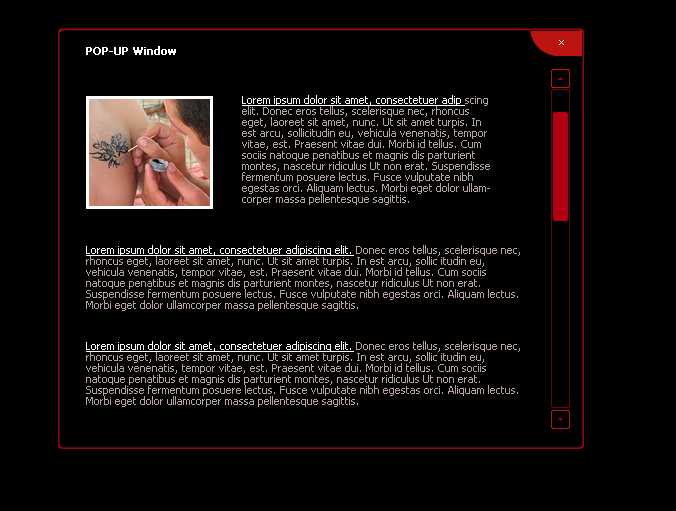
<style>
.page{position:relative;width:676px;height:511px;background:#000000}
.page>*{position:absolute;margin:0}
.t1{font:11px "Tahoma";color:#ffffff;font-weight:bold}
.t2{font:11px/11px "Tahoma";color:#b5a3a3}
.t3{font:11px/11px "Tahoma";color:#ffffff;text-decoration:underline}
</style>
<div class="page">
<p class="t1" style="left:86px;top:46px;width:90px;height:9px">POP-UP Window</p>
<p class="t2" style="left:242px;top:95px;width:248px;height:110px"><span class="t3">Lorem ipsum dolor sit amet, consectetuer adip </span>scing elit. Donec eros tellus, scelerisque nec, rhoncus eget, laoreet sit amet, nunc. Ut sit amet turpis. In est arcu, sollicitudin eu, vehicula venenatis, tempor vitae, est. Praesent vitae dui. Morbi id tellus. Cum sociis natoque penatibus et magnis dis parturient montes, nascetur ridiculus Ut non erat. Suspendisse fermentum posuere lectus. Fusce vulputate nibh egestas orci. Aliquam lectus. Morbi eget dolor ullamcorper massa pellentesque sagittis.</p>
<p class="t2" style="left:86px;top:245px;width:434px;height:66px"><span class="t3">Lorem ipsum dolor sit amet, consectetuer adipiscing elit. </span>Donec eros tellus, scelerisque nec, rhoncus eget, laoreet sit amet, nunc. Ut sit amet turpis. In est arcu, sollic itudin eu, vehicula venenatis, tempor vitae, est. Praesent vitae dui. Morbi id tellus. Cum sociis natoque penatibus et magnis dis parturient montes, nascetur ridiculus Ut non erat. Suspendisse fermentum posuere lectus. Fusce vulputate nibh egestas orci. Aliquam lectus. Morbi eget dolor ullamcorper massa pellentesque sagittis.</p>
<p class="t2" style="left:86px;top:341px;width:434px;height:66px"><span class="t3">Lorem ipsum dolor sit amet, consectetuer adipiscing elit. </span>Donec eros tellus, scelerisque nec, rhoncus eget, laoreet sit amet, nunc. Ut sit amet turpis. In est arcu, sollic itudin eu, vehicula venenatis, tempor vitae, est. Praesent vitae dui. Morbi id tellus. Cum sociis natoque penatibus et magnis dis parturient montes, nascetur ridiculus Ut non erat. Suspendisse fermentum posuere lectus. Fusce vulputate nibh egestas orci. Aliquam lectus. Morbi eget dolor ullamcorper massa pellentesque sagittis.</p>
</div>
